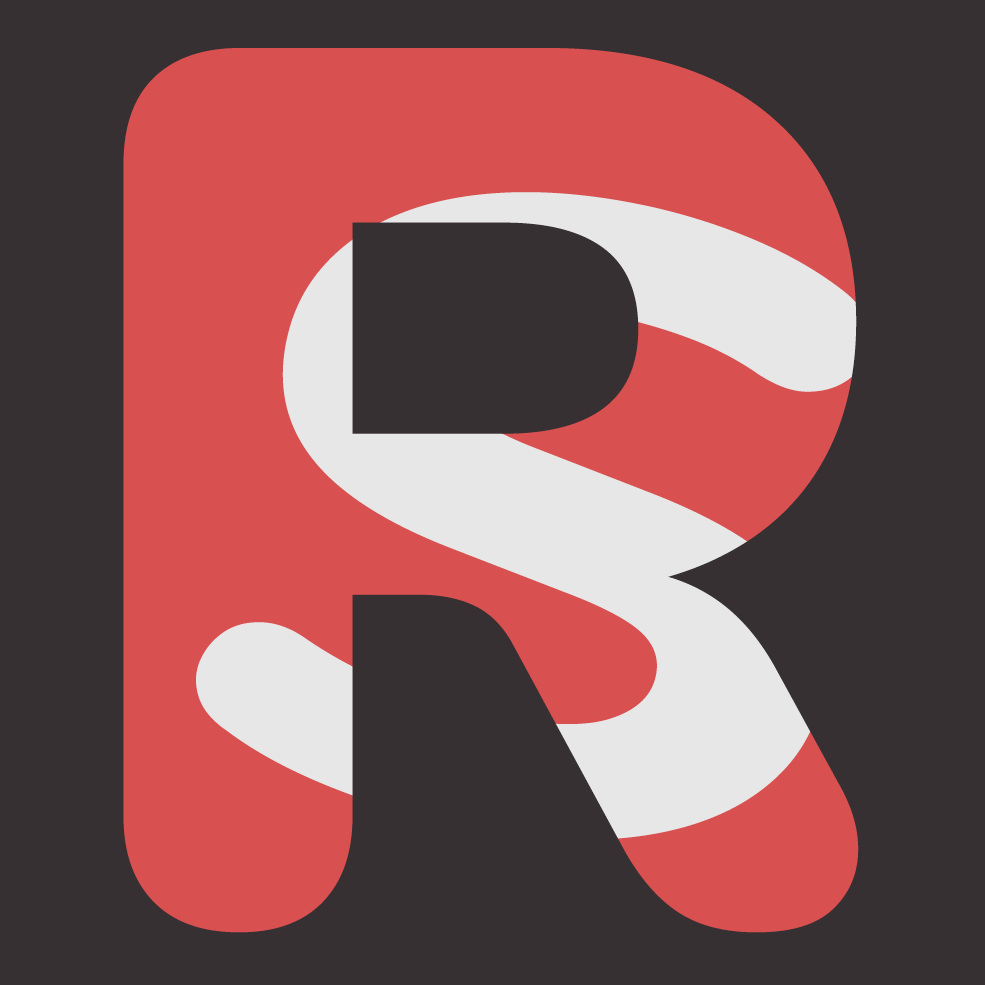
<style>
.page{position:relative;width:985px;height:985px;background:#363032}
.page>*{position:absolute;margin:0}
.t1{font:1236.5px "NunitoExtraLight-Black";color:#d95050}
.t2{font:889.1px "NunitoExtraLight-ExtraBold";scale:1.22 1}
.t3{font:889.1px "NunitoExtraLight-ExtraBold";color:#e7e7e7;scale:1.22 1}
</style>
<div class="page">
<p class="t1" style="left:123px;top:48px;width:736px;height:885px">R</p>
<p class="t1" style="left:123px;top:48px;width:736px;height:885px">R</p>
<p class="t2" style="left:196px;top:192px;width:674px;height:648px;rotate:11deg">S</p>
<p class="t3" style="left:196px;top:192px;width:674px;height:648px;rotate:11deg">S</p>
</div>
